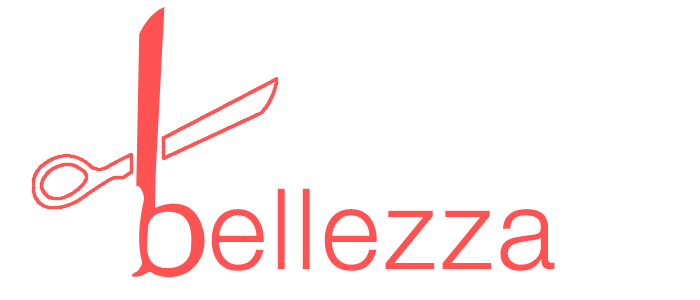
<style>
.page{position:relative;width:700px;height:300px;background:#ffffff}
.page>*{position:absolute;margin:0}
.t1{font:112.5px "HelveticaNeueLight";letter-spacing:0.04em;color:#ff5252}
</style>
<div class="page">
<p class="t1" style="left:211px;top:188px;width:344px;height:83px">ellezza</p>
</div>
